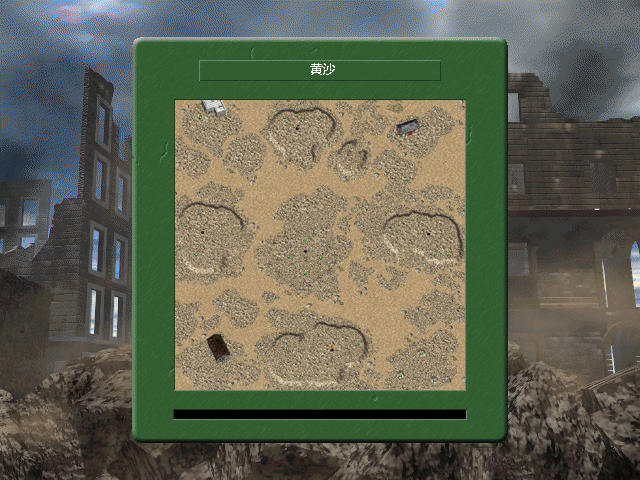
<style>
.page{position:relative;width:640px;height:480px}
.page>*{position:absolute;margin:0}
.t1{font:14px "SimHei";color:#ffffff}
</style>
<div class="page">
<p class="t1" style="left:310px;top:63px;width:25px;height:12px">黄沙</p>
</div>
